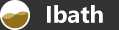
<style>
.page{position:relative;width:119px;height:30px;background:#333333}
.page>*{position:absolute;margin:0}
.t1{font:24px "LeelawadeeUI-Bold";color:#ffffff}
</style>
<div class="page">
<p class="t1" style="left:47px;top:5px;width:56px;height:18px">Ibath</p>
</div>
